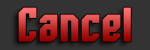
<style>
.page{position:relative;width:150px;height:50px;background:#333333}
.page>*{position:absolute;margin:0}
.t1{font:47.9px "Whitestone-Bold"}
</style>
<div class="page">
<p class="t1" style="left:18px;top:7px;width:113px;height:35px">Cancel</p>
</div>
